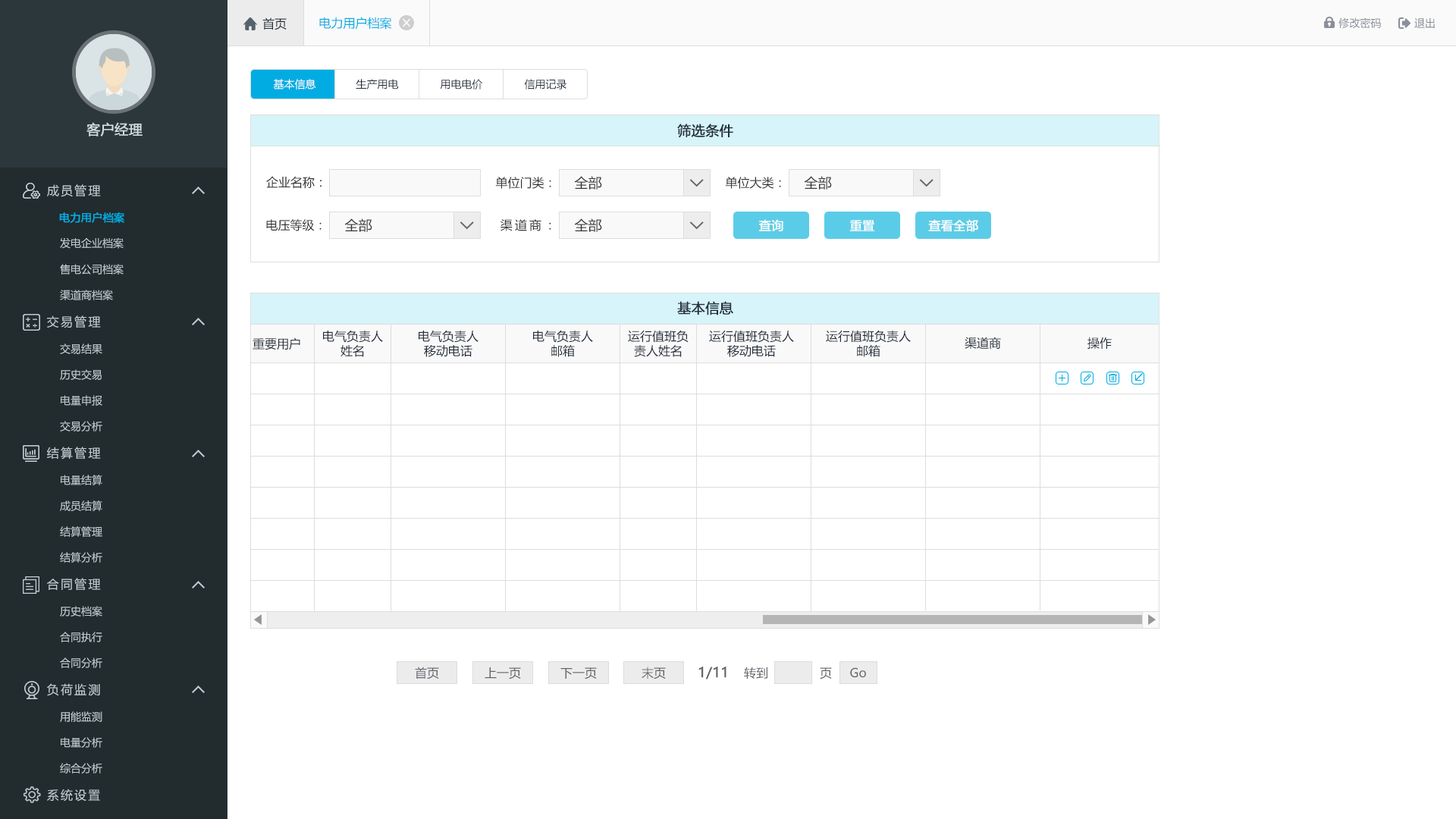
<style>
.page{position:relative;width:1456px;height:819px;background:#ffffff}
.page>*{position:absolute;margin:0}
.t1{font:12.1px "MicrosoftYaHei";color:#242e3b}
.t2{font:12.1px "MicrosoftYaHei";color:#00ace2}
.t3{font:10.6px "MicrosoftYaHei";color:#8a8f99}
.t4{font:10.6px "MicrosoftYaHei";color:#ffffff}
.t5{font:10.6px "MicrosoftYaHei";color:#242e3b}
.t6{font:13.6px "MicrosoftYaHei";color:#d1dce2;font-weight:bold}
.t7{font:13.6px "MicrosoftYaHei";color:#242e3b;font-weight:bold}
.t8{font:12.1px "MicrosoftYaHei";letter-spacing:0.14em;color:#c2cdd2}
.t9{font:12.1px "MicrosoftYaHei";color:#333333}
.t10{font:13.6px "MicrosoftYaHei";color:#333333}
.t11{font:10.6px "MicrosoftYaHei";color:#00ace2;font-weight:bold}
.t12{font:12.1px "MicrosoftYaHei";letter-spacing:0.2em;color:#333333}
.t13{font:12.1px "MicrosoftYaHei";color:#ffffff;font-weight:bold}
.t14{font:10.6px "MicrosoftYaHei";color:#c2cdd2}
.t15{font:12.1px "MicrosoftYaHei";color:#61656b}
.t16{font:13.6px "MicrosoftYaHei";color:#61656b;font-weight:bold}
</style>
<div class="page">
<p class="t1" style="left:262px;top:17px;width:25px;height:13px">首页</p>
<p class="t2" style="left:319px;top:17px;width:73px;height:13px">电力用户档案</p>
<p class="t3" style="left:1338px;top:17px;width:43px;height:12px">修改密码</p>
<p class="t3" style="left:1414px;top:17px;width:21px;height:11px">退出</p>
<p class="t4" style="left:273px;top:79px;width:43px;height:10px">基本信息</p>
<p class="t5" style="left:356px;top:79px;width:43px;height:10px">生产用电</p>
<p class="t5" style="left:440px;top:79px;width:43px;height:10px">用电电价</p>
<p class="t5" style="left:524px;top:79px;width:42px;height:10px">信用记录</p>
<p class="t6" style="left:86px;top:122px;width:57px;height:14px">客户经理</p>
<p class="t7" style="left:677px;top:124px;width:56px;height:14px">筛选条件</p>
<p class="t8" style="left:47px;top:184px;width:54px;height:13px">成员管理</p>
<p class="t9" style="left:266px;top:176px;width:56px;height:13px">企业名称：</p>
<p class="t9" style="left:495px;top:177px;width:56px;height:12px">单位门类：</p>
<p class="t10" style="left:574px;top:176px;width:28px;height:14px">全部</p>
<p class="t9" style="left:725px;top:177px;width:56px;height:12px">单位大类：</p>
<p class="t10" style="left:804px;top:176px;width:28px;height:14px">全部</p>
<p class="t11" style="left:59px;top:212px;width:65px;height:11px">电力用户档案</p>
<p class="t9" style="left:266px;top:219px;width:56px;height:12px">电压等级：</p>
<p class="t10" style="left:344px;top:218px;width:28px;height:14px">全部</p>
<p class="t12" style="left:500px;top:219px;width:51px;height:12px">渠道商<span class="t9">：</span></p>
<p class="t10" style="left:574px;top:218px;width:28px;height:14px">全部</p>
<p class="t13" style="left:758px;top:219px;width:25px;height:12px">查询</p>
<p class="t13" style="left:849px;top:220px;width:26px;height:11px">重置</p>
<p class="t13" style="left:928px;top:219px;width:50px;height:13px">查看全部</p>
<p class="t14" style="left:60px;top:237px;width:64px;height:12px">发电企业档案</p>
<p class="t14" style="left:60px;top:264px;width:64px;height:11px">售电公司档案</p>
<p class="t14" style="left:60px;top:290px;width:53px;height:10px">渠道商档案</p>
<p class="t7" style="left:677px;top:301px;width:56px;height:14px">基本信息</p>
<p class="t8" style="left:47px;top:315px;width:54px;height:13px">交易管理</p>
<p class="t1" style="left:323px;top:330px;width:60px;height:27px;text-align:center">电气负责人<br>姓名</p>
<p class="t1" style="left:419px;top:330px;width:60px;height:27px;text-align:center">电气负责人<br>移动电话</p>
<p class="t1" style="left:533px;top:330px;width:60px;height:27px;text-align:center">电气负责人<br>邮箱</p>
<p class="t1" style="left:628px;top:330px;width:61px;height:27px;text-align:center">运行值班负<br>责人姓名</p>
<p class="t1" style="left:709px;top:330px;width:85px;height:27px;text-align:center">运行值班负责人<br>移动电话</p>
<p class="t1" style="left:826px;top:330px;width:85px;height:27px;text-align:center">运行值班负责人<br>邮箱</p>
<p class="t1" style="left:253px;top:337px;width:47px;height:13px">重要用户</p>
<p class="t1" style="left:965px;top:337px;width:36px;height:12px">渠道商</p>
<p class="t1" style="left:1087px;top:337px;width:25px;height:12px">操作</p>
<p class="t14" style="left:60px;top:344px;width:42px;height:10px">交易结果</p>
<p class="t14" style="left:60px;top:369px;width:42px;height:11px">历史交易</p>
<p class="t14" style="left:61px;top:395px;width:41px;height:11px">电量申报</p>
<p class="t14" style="left:60px;top:421px;width:42px;height:10px">交易分析</p>
<p class="t8" style="left:47px;top:447px;width:54px;height:13px">结算管理</p>
<p class="t14" style="left:61px;top:475px;width:41px;height:10px">电量结算</p>
<p class="t14" style="left:60px;top:500px;width:42px;height:11px">成员结算</p>
<p class="t14" style="left:60px;top:526px;width:42px;height:11px">结算管理</p>
<p class="t14" style="left:60px;top:552px;width:42px;height:11px">结算分析</p>
<p class="t8" style="left:47px;top:578px;width:54px;height:12px">合同管理</p>
<p class="t14" style="left:60px;top:606px;width:42px;height:11px">历史档案</p>
<p class="t14" style="left:60px;top:632px;width:42px;height:10px">合同执行</p>
<p class="t14" style="left:60px;top:657px;width:42px;height:11px">合同分析</p>
<p class="t15" style="left:415px;top:667px;width:24px;height:12px">首页</p>
<p class="t15" style="left:485px;top:667px;width:36px;height:12px">上一页</p>
<p class="t15" style="left:560px;top:667px;width:37px;height:12px">下一页</p>
<p class="t15" style="left:642px;top:667px;width:24px;height:12px">末页</p>
<p class="t16" style="left:698px;top:667px;width:28px;height:12px">1/11</p>
<p class="t15" style="left:744px;top:667px;width:23px;height:12px">转到</p>
<p class="t15" style="left:820px;top:667px;width:12px;height:12px">页</p>
<p class="t15" style="left:850px;top:667px;width:16px;height:11px">Go</p>
<p class="t8" style="left:47px;top:683px;width:53px;height:13px">负荷监测</p>
<p class="t14" style="left:60px;top:711px;width:42px;height:11px">用能监测</p>
<p class="t14" style="left:61px;top:737px;width:41px;height:11px">电量分析</p>
<p class="t14" style="left:60px;top:763px;width:42px;height:10px">综合分析</p>
<p class="t8" style="left:47px;top:789px;width:53px;height:13px">系统设置</p>
</div>
